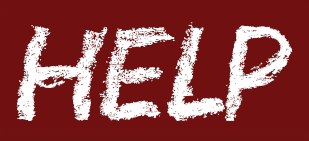
<style>
.page{position:relative;width:309px;height:141px;background:#711010}
.page>*{position:absolute;margin:0}
.t1{font:135px "Colored-Crayons";color:#ffffff}
</style>
<div class="page">
<p class="t1" style="left:16px;top:22px;width:277px;height:99px">HELP</p>
</div>
